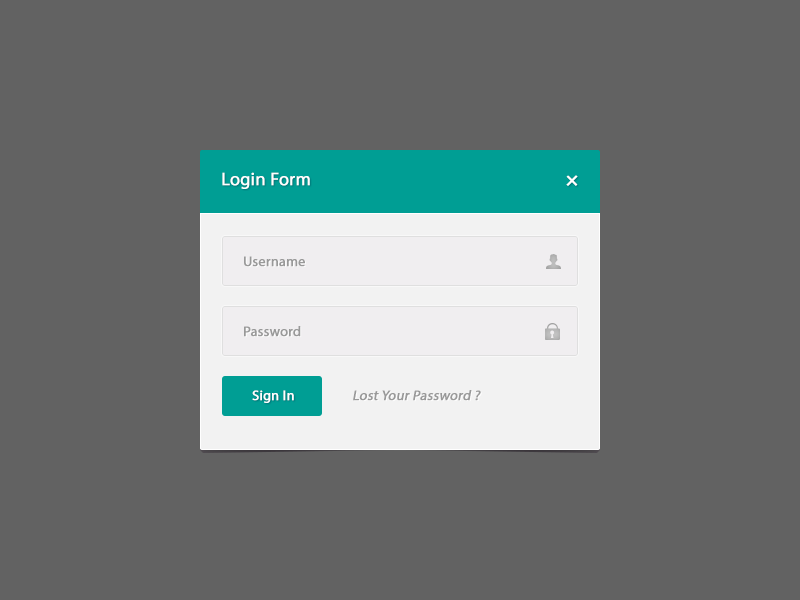
<style>
.page{position:relative;width:800px;height:600px;background:#626262}
.page>*{position:absolute;margin:0}
.t1{font:18px "MyriadPro-Regular";color:#ffffff;font-weight:bold}
.t2{font:24px "MyriadPro-Regular";color:#ffffff;font-weight:bold}
.t3{font:14px "MyriadPro-Regular";color:#999999;font-weight:bold}
.t4{font:14px "MyriadPro-Regular";color:#ffffff;font-weight:bold}
.t5{font:14px "MyriadPro-Regular";color:#999999;font-weight:bold;font-style:italic}
</style>
<div class="page">
<p class="t1" style="left:222px;top:172px;width:88px;height:17px">Login Form</p>
<p class="t2" style="left:566px;top:175px;width:12px;height:11px;rotate:45deg">+</p>
<p class="t3" style="left:244px;top:256px;width:61px;height:11px">Username</p>
<p class="t3" style="left:244px;top:326px;width:57px;height:11px">Password</p>
<p class="t4" style="left:252px;top:390px;width:42px;height:13px">Sign In</p>
<p class="t5" style="left:353px;top:390px;width:128px;height:11px">Lost Your Password ?</p>
</div>
